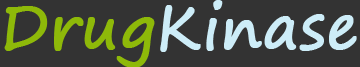
<style>
.page{position:relative;width:360px;height:67px;background:#333333}
.page>*{position:absolute;margin:0}
.t1{font:60px "SegoePrint";color:#cdedf8;font-weight:bold}
.t2{font:60px "SegoePrint";color:#8eb909;font-weight:bold}
</style>
<div class="page">
<p class="t1" style="left:4px;top:0px;width:353px;height:68px"><span class="t2">Drug</span>Kinase</p>
</div>
